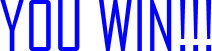
<style>
.page{position:relative;width:212px;height:51px;background:#ffffff}
.page>*{position:absolute;margin:0}
.t1{font:66.7px "AgencyFB-Reg";color:#0002fe}
</style>
<div class="page">
<p class="t1" style="left:0px;top:0px;width:212px;height:51px">YOU WIN!!!</p>
</div>
